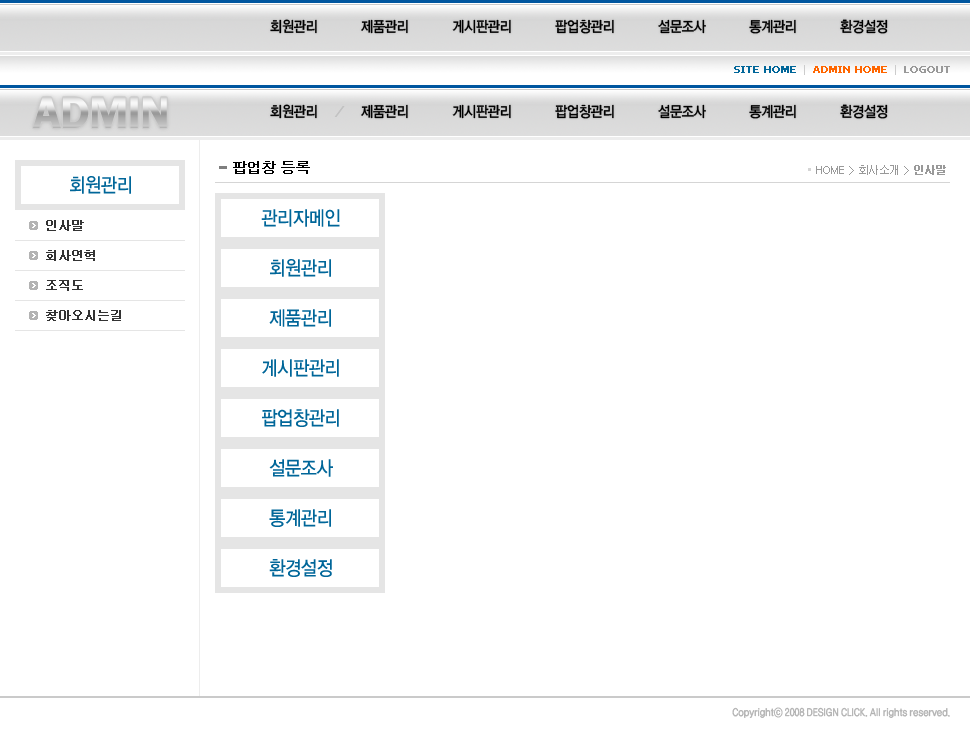
<style>
.page{position:relative;width:970px;height:730px;background:#ffffff}
.page>*{position:absolute;margin:0}
.t1{font:15px "YDIYGO330";letter-spacing:-0.02em;color:#000000;text-transform:uppercase;scale:0.88 1}
.t2{font:10px "Tahoma";color:#ff6600;font-weight:bold}
.t3{font:10px "Tahoma";color:#006699;font-weight:bold}
.t4{font:10px "Tahoma";color:#cccccc}
.t5{font:10px "Tahoma";color:#999999;font-weight:bold}
.t6{font:14px "Dotum";letter-spacing:-0.05em;color:#000000;font-weight:bold}
.t7{font:11px "Dotum";color:#999999}
.t8{font:11px "Dotum";color:#999999;font-weight:bold}
.t9{font:20px "YDIYGO330";letter-spacing:-0.02em;color:#006699;text-transform:uppercase;scale:0.88 1}
.t10{font:20px/50px "YDIYGO330";letter-spacing:-0.02em;color:#006699;text-transform:uppercase;scale:0.88 1}
.t11{font:12px/30px "Gulim";color:#333333;font-weight:bold}
.t12{font:10px "YDIWebDotum";color:#b2b2b2;font-weight:bold;scale:0.85 1}
</style>
<div class="page">
<p class="t1" style="left:270px;top:19px;width:618px;height:15px">회원관리          제품관리          게시판관리          팝업창관리          설문조사          통계관리          환경설정</p>
<p class="t2" style="left:734px;top:65px;width:216px;height:10px"><span class="t3">SITE HOME</span><span class="t4">  |  </span>ADMIN HOME<span class="t4">  |  </span><span class="t5">LOGOUT</span></p>
<p class="t1" style="left:270px;top:104px;width:618px;height:15px">회원관리          제품관리          게시판관리          팝업창관리          설문조사          통계관리          환경설정</p>
<p class="t6" style="left:233px;top:161px;width:77px;height:13px">팝업창 등록</p>
<p class="t7" style="left:816px;top:165px;width:130px;height:10px">HOME &gt; 회사소개 &gt; <span class="t8">인사말</span></p>
<p class="t9" style="left:70px;top:176px;width:61px;height:18px">회원관리</p>
<p class="t10" style="left:261px;top:209px;width:79px;height:368px;text-align:center">관리자메인<br>회원관리<br>제품관리<br>게시판관리<br>팝업창관리<br>설문조사<br>통계관리<br>환경설정</p>
<p class="t11" style="left:46px;top:220px;width:75px;height:101px">인사말<br>회사연혁<br>조직도<br>찾아오시는길</p>
<p class="t12" style="left:732px;top:707px;width:218px;height:11px">Copyrightⓒ 2008 DESIGN CLICK. All rights reserved.</p>
</div>
